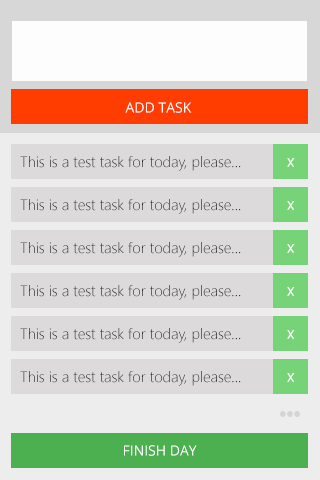
<style>
.page{position:relative;width:320px;height:480px;background:#dcdada}
.page>*{position:absolute;margin:0}
.t1{font:14px "OpenSans";color:#ffffff}
.t2{font:15px "SegoeUI-Light";color:#242424}
.t3{font:16.7px "SegoeUI-Light";color:#ffffff;font-weight:bold}
</style>
<div class="page">
<p class="t1" style="left:125px;top:102px;width:67px;height:11px">ADD TASK</p>
<p class="t2" style="left:20px;top:156px;width:221px;height:15px">This is a test task for today, please...</p>
<p class="t3" style="left:287px;top:158px;width:8px;height:9px">x</p>
<p class="t2" style="left:20px;top:199px;width:221px;height:15px">This is a test task for today, please...</p>
<p class="t3" style="left:287px;top:201px;width:8px;height:9px">x</p>
<p class="t2" style="left:20px;top:242px;width:221px;height:15px">This is a test task for today, please...</p>
<p class="t3" style="left:287px;top:244px;width:8px;height:9px">x</p>
<p class="t2" style="left:20px;top:285px;width:221px;height:15px">This is a test task for today, please...</p>
<p class="t3" style="left:287px;top:287px;width:8px;height:9px">x</p>
<p class="t2" style="left:20px;top:328px;width:221px;height:15px">This is a test task for today, please...</p>
<p class="t3" style="left:287px;top:330px;width:8px;height:9px">x</p>
<p class="t2" style="left:20px;top:371px;width:221px;height:15px">This is a test task for today, please...</p>
<p class="t3" style="left:287px;top:373px;width:8px;height:9px">x</p>
<p class="t1" style="left:124px;top:445px;width:73px;height:11px">FINISH DAY</p>
</div>
